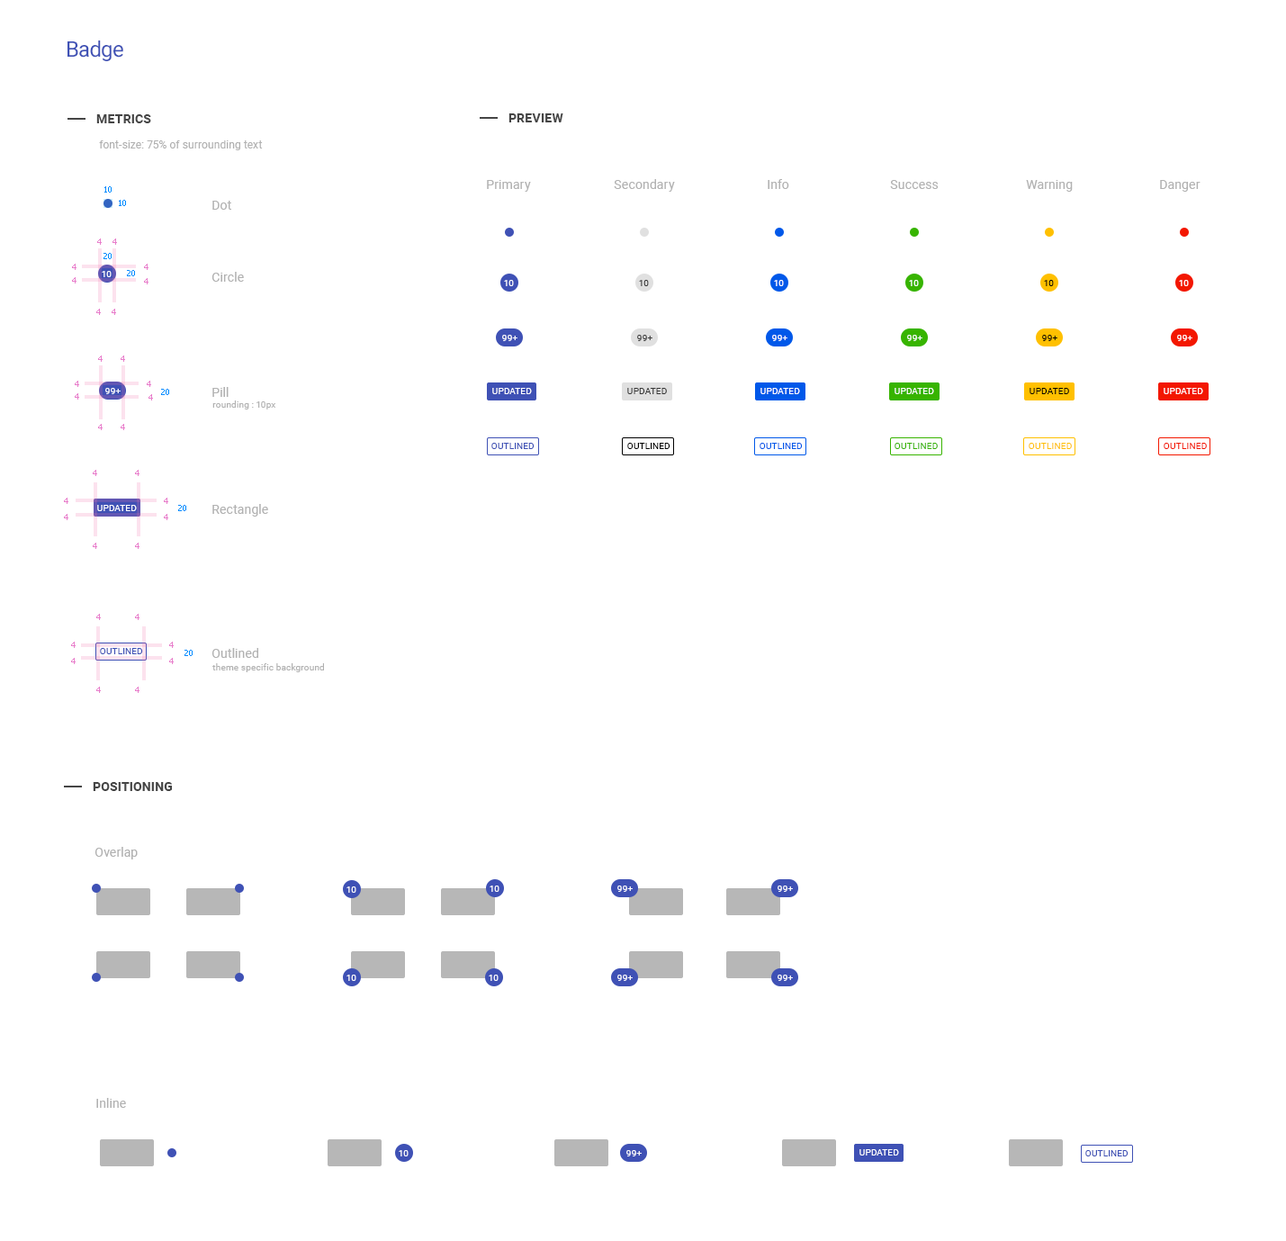
<style>
.page{position:relative;width:1286px;height:1241px;background:#ffffff}
.page>*{position:absolute;margin:0}
.t1{font:21.6px "Roboto-Regular";letter-spacing:-0.025em;color:#3f51b5}
.t2{font:12.6px "Roboto-Bold";letter-spacing:0.01em;color:#454545;text-transform:uppercase}
.t3{font:10.8px "Roboto-Regular";letter-spacing:0.01em;color:#b1b1b1}
.t4{font:12.6px "Roboto-Regular";letter-spacing:0.01em;color:#b1b1b1}
.t5{font:8.1px "Tahoma";color:#008aff}
.t6{font:8.1px "Tahoma";color:#e87ecb}
.t7{font:9px "Roboto-Regular";letter-spacing:0.01em;color:#ffffff}
.t8{font:9px "Roboto-Regular";letter-spacing:0.01em;color:#373737}
.t9{font:9px "Roboto-Regular";letter-spacing:0.01em;color:#000000}
.t10{font:9px "Roboto-Regular";letter-spacing:0.01em;color:#fefefe}
.t11{font:9px "Roboto-Regular";letter-spacing:0.01em;color:#fffefe}
.t12{font:9px "Roboto-Regular";letter-spacing:0.01em;color:#010101}
.t13{font:9px "Roboto-Regular";color:#ffffff;text-transform:uppercase}
.t14{font:9px "Roboto-Regular";letter-spacing:0.01em;color:#373737;text-transform:uppercase}
.t15{font:9px "Roboto-Regular";color:#fffefe;text-transform:uppercase}
.t16{font:9px "Roboto-Regular";letter-spacing:0.01em;color:#000000;text-transform:uppercase}
.t17{font:9px "Roboto-Regular";letter-spacing:0.01em;color:#b1b1b1}
.t18{font:9px "Roboto-Regular";color:#3f51b5;text-transform:uppercase}
.t19{font:9px "Roboto-Regular";color:#000000;text-transform:uppercase}
.t20{font:9px "Roboto-Regular";color:#0058e9;text-transform:uppercase}
.t21{font:9px "Roboto-Regular";letter-spacing:0.01em;color:#37b400;text-transform:uppercase}
.t22{font:9px "Roboto-Regular";letter-spacing:0.01em;color:#ffc000;text-transform:uppercase}
.t23{font:9px "Roboto-Regular";letter-spacing:0.01em;color:#f31700;text-transform:uppercase}
</style>
<div class="page">
<p class="t1" style="left:68px;top:40px;width:55px;height:21px">Badge</p>
<p class="t2" style="left:508px;top:113px;width:55px;height:9px">preview</p>
<p class="t2" style="left:96px;top:114px;width:55px;height:9px">metrics</p>
<p class="t3" style="left:99px;top:140px;width:164px;height:10px">font-size: 75% of surrounding text</p>
<p class="t4" style="left:487px;top:180px;width:44px;height:12px">Primary</p>
<p class="t4" style="left:614px;top:179px;width:61px;height:13px">Secondary</p>
<p class="t4" style="left:768px;top:179px;width:21px;height:10px">Info</p>
<p class="t4" style="left:890px;top:180px;width:49px;height:9px">Success</p>
<p class="t4" style="left:1026px;top:180px;width:47px;height:12px">Warning</p>
<p class="t4" style="left:1160px;top:180px;width:41px;height:12px">Danger</p>
<p class="t5" style="left:104px;top:186px;width:8px;height:7px">10</p>
<p class="t5" style="left:119px;top:200px;width:7px;height:6px">10</p>
<p class="t4" style="left:212px;top:201px;width:19px;height:9px">Dot</p>
<p class="t6" style="left:97px;top:238px;width:5px;height:7px">4</p>
<p class="t6" style="left:112px;top:238px;width:5px;height:7px">4</p>
<p class="t5" style="left:104px;top:253px;width:8px;height:6px">20</p>
<p class="t6" style="left:72px;top:264px;width:4px;height:6px">4</p>
<p class="t5" style="left:127px;top:270px;width:8px;height:6px">20</p>
<p class="t6" style="left:144px;top:264px;width:4px;height:6px">4</p>
<p class="t6" style="left:72px;top:277px;width:4px;height:7px">4</p>
<p class="t7" style="left:102px;top:271px;width:10px;height:6px">10</p>
<p class="t6" style="left:144px;top:278px;width:4px;height:6px">4</p>
<p class="t4" style="left:212px;top:272px;width:32px;height:10px">Circle</p>
<p class="t7" style="left:504px;top:280px;width:10px;height:6px">10</p>
<p class="t8" style="left:639px;top:280px;width:10px;height:6px">10</p>
<p class="t7" style="left:774px;top:280px;width:10px;height:6px">10</p>
<p class="t7" style="left:909px;top:280px;width:10px;height:6px">10</p>
<p class="t9" style="left:1044px;top:280px;width:10px;height:6px">10</p>
<p class="t7" style="left:1179px;top:280px;width:10px;height:6px">10</p>
<p class="t6" style="left:96px;top:309px;width:5px;height:6px">4</p>
<p class="t6" style="left:112px;top:309px;width:4px;height:6px">4</p>
<p class="t7" style="left:502px;top:335px;width:16px;height:6px">99+</p>
<p class="t8" style="left:637px;top:335px;width:15px;height:6px">99+</p>
<p class="t10" style="left:772px;top:335px;width:16px;height:6px">99+</p>
<p class="t11" style="left:907px;top:335px;width:15px;height:6px">99+</p>
<p class="t12" style="left:1042px;top:335px;width:16px;height:6px">99+</p>
<p class="t11" style="left:1177px;top:335px;width:15px;height:6px">99+</p>
<p class="t6" style="left:98px;top:356px;width:5px;height:6px">4</p>
<p class="t6" style="left:121px;top:356px;width:4px;height:6px">4</p>
<p class="t6" style="left:75px;top:381px;width:4px;height:6px">4</p>
<p class="t7" style="left:105px;top:388px;width:16px;height:6px">99+</p>
<p class="t6" style="left:147px;top:381px;width:4px;height:6px">4</p>
<p class="t5" style="left:161px;top:389px;width:8px;height:6px">20</p>
<p class="t4" style="left:212px;top:387px;width:17px;height:10px">Pill</p>
<p class="t13" style="left:492px;top:388px;width:40px;height:6px">Updated</p>
<p class="t14" style="left:627px;top:388px;width:40px;height:6px">Updated</p>
<p class="t13" style="left:760px;top:388px;width:40px;height:6px">Updated</p>
<p class="t15" style="left:895px;top:388px;width:39px;height:6px">Updated</p>
<p class="t16" style="left:1030px;top:388px;width:39px;height:6px">Updated</p>
<p class="t13" style="left:1164px;top:388px;width:39px;height:6px">Updated</p>
<p class="t6" style="left:75px;top:393px;width:4px;height:7px">4</p>
<p class="t6" style="left:148px;top:394px;width:5px;height:6px">4</p>
<p class="t17" style="left:212px;top:400px;width:64px;height:10px">rounding : 10px</p>
<p class="t6" style="left:98px;top:424px;width:5px;height:6px">4</p>
<p class="t6" style="left:121px;top:424px;width:4px;height:6px">4</p>
<p class="t18" style="left:491px;top:443px;width:44px;height:6px">Outlined</p>
<p class="t19" style="left:627px;top:443px;width:43px;height:6px">Outlined</p>
<p class="t20" style="left:760px;top:443px;width:43px;height:6px">Outlined</p>
<p class="t21" style="left:895px;top:443px;width:43px;height:6px">Outlined</p>
<p class="t22" style="left:1029px;top:443px;width:43px;height:6px">Outlined</p>
<p class="t23" style="left:1164px;top:443px;width:43px;height:6px">Outlined</p>
<p class="t6" style="left:93px;top:470px;width:4px;height:6px">4</p>
<p class="t6" style="left:135px;top:470px;width:5px;height:6px">4</p>
<p class="t6" style="left:64px;top:498px;width:4px;height:6px">4</p>
<p class="t6" style="left:164px;top:498px;width:4px;height:6px">4</p>
<p class="t13" style="left:97px;top:505px;width:40px;height:6px">Updated</p>
<p class="t5" style="left:178px;top:505px;width:8px;height:6px">20</p>
<p class="t4" style="left:212px;top:504px;width:56px;height:13px">Rectangle</p>
<p class="t6" style="left:64px;top:514px;width:4px;height:6px">4</p>
<p class="t6" style="left:164px;top:514px;width:4px;height:6px">4</p>
<p class="t6" style="left:93px;top:543px;width:4px;height:6px">4</p>
<p class="t6" style="left:135px;top:543px;width:5px;height:6px">4</p>
<p class="t6" style="left:96px;top:614px;width:5px;height:6px">4</p>
<p class="t6" style="left:135px;top:614px;width:5px;height:6px">4</p>
<p class="t6" style="left:71px;top:642px;width:5px;height:6px">4</p>
<p class="t6" style="left:169px;top:642px;width:5px;height:6px">4</p>
<p class="t18" style="left:100px;top:648px;width:43px;height:6px">Outlined</p>
<p class="t5" style="left:184px;top:650px;width:9px;height:6px">20</p>
<p class="t4" style="left:212px;top:648px;width:46px;height:10px">Outlined</p>
<p class="t6" style="left:71px;top:658px;width:5px;height:6px">4</p>
<p class="t6" style="left:169px;top:658px;width:5px;height:6px">4</p>
<p class="t17" style="left:212px;top:663px;width:112px;height:9px">theme specific background</p>
<p class="t6" style="left:96px;top:687px;width:5px;height:6px">4</p>
<p class="t6" style="left:135px;top:687px;width:5px;height:6px">4</p>
<p class="t2" style="left:93px;top:782px;width:80px;height:9px">positioning</p>
<p class="t4" style="left:94px;top:847px;width:44px;height:13px">Overlap</p>
<p class="t7" style="left:346px;top:886px;width:10px;height:7px">10</p>
<p class="t7" style="left:490px;top:886px;width:10px;height:6px">10</p>
<p class="t7" style="left:617px;top:886px;width:16px;height:6px">99+</p>
<p class="t7" style="left:778px;top:886px;width:15px;height:6px">99+</p>
<p class="t7" style="left:346px;top:975px;width:10px;height:6px">10</p>
<p class="t7" style="left:489px;top:975px;width:10px;height:6px">10</p>
<p class="t7" style="left:617px;top:975px;width:16px;height:6px">99+</p>
<p class="t7" style="left:778px;top:975px;width:15px;height:6px">99+</p>
<p class="t4" style="left:96px;top:1098px;width:30px;height:10px">Inline</p>
<p class="t7" style="left:399px;top:1150px;width:10px;height:6px">10</p>
<p class="t7" style="left:626px;top:1150px;width:16px;height:6px">99+</p>
<p class="t13" style="left:860px;top:1149px;width:39px;height:7px">Updated</p>
<p class="t18" style="left:1085px;top:1150px;width:44px;height:6px">Outlined</p>
</div>
